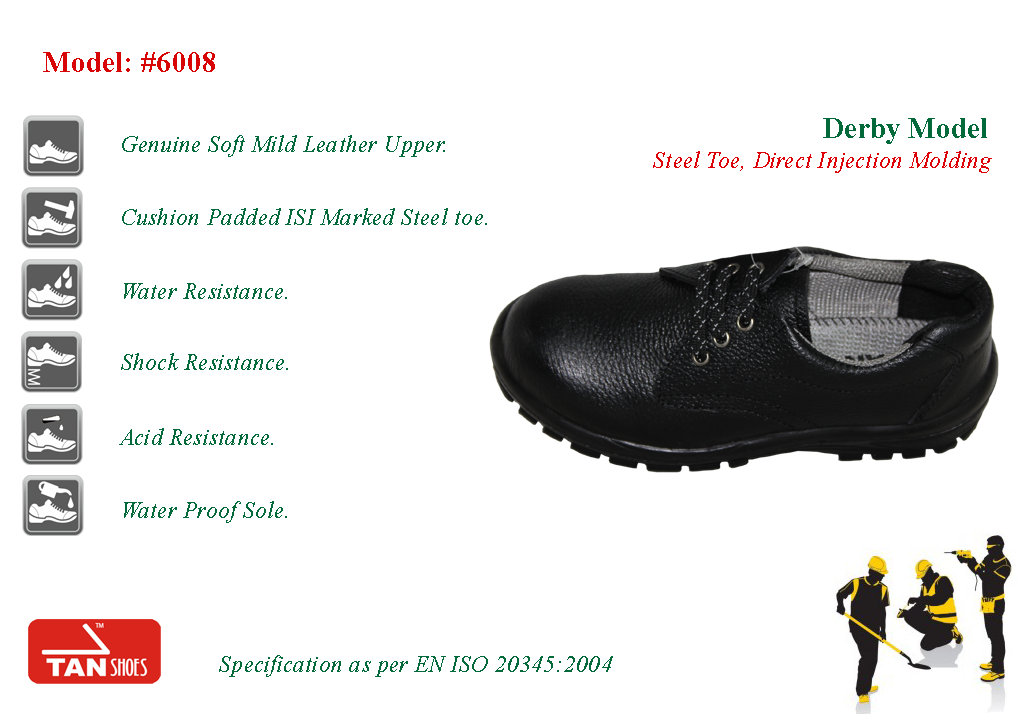
<style>
.page{position:relative;width:1024px;height:714px;background:#ffffff}
.page>*{position:absolute;margin:0}
.t1{font:30px "TimesNewRomanPS-BoldMT";letter-spacing:0.01em;color:#d80505;scale:0.95 1}
.t2{font:30px "TimesNewRomanPS-BoldMT";letter-spacing:0.01em;color:#026a3a;scale:0.95 1}
.t3{font:24px "TimesNewRomanPS-ItalicMT";letter-spacing:0.01em;color:#026a3a;scale:0.95 1}
.t4{font:24px "TimesNewRomanPS-ItalicMT";letter-spacing:0.01em;color:#dc0207;scale:0.95 1}
</style>
<div class="page">
<p class="t1" style="left:43px;top:52px;width:172px;height:20px">Model: #6008</p>
<p class="t2" style="left:823px;top:118px;width:164px;height:26px">Derby Model</p>
<p class="t3" style="left:122px;top:135px;width:323px;height:22px">Genuine Soft Mild Leather Upper.</p>
<p class="t4" style="left:653px;top:151px;width:339px;height:22px">Steel Toe, Direct Injection Molding</p>
<p class="t3" style="left:122px;top:208px;width:365px;height:17px">Cushion Padded ISI Marked Steel toe.</p>
<p class="t3" style="left:124px;top:283px;width:163px;height:16px">Water Resistance.</p>
<p class="t3" style="left:121px;top:353px;width:167px;height:17px">Shock Resistance.</p>
<p class="t3" style="left:119px;top:428px;width:154px;height:17px">Acid Resistance.</p>
<p class="t3" style="left:124px;top:501px;width:163px;height:22px">Water Proof Sole.</p>
<p class="t3" style="left:219px;top:655px;width:394px;height:22px">Specification as per EN ISO 20345:2004</p>
</div>
